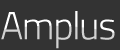
<style>
.page{position:relative;width:120px;height:50px;background:#333333}
.page>*{position:absolute;margin:0}
.t1{font:39px "TitilliumText25L-250wt";letter-spacing:-0.06em}
</style>
<div class="page">
<p class="t1" style="left:1px;top:11px;width:114px;height:38px">Amplus</p>
</div>
